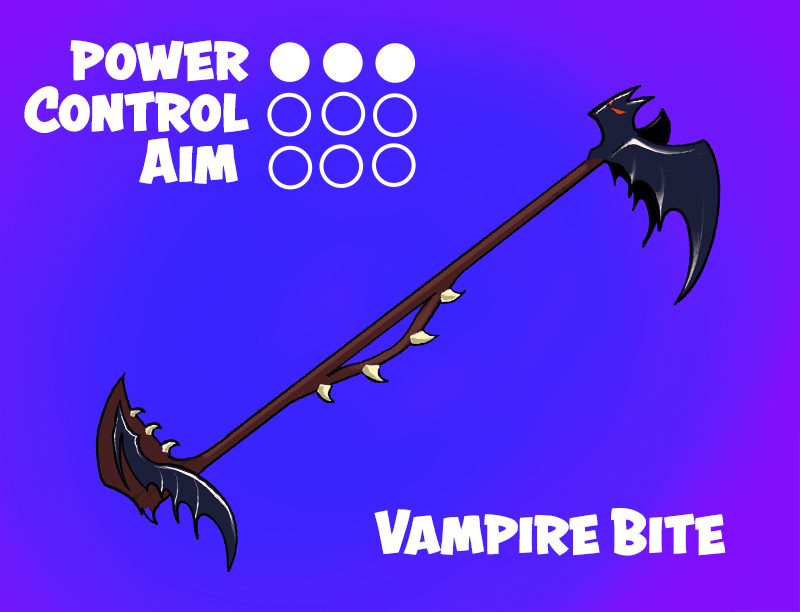
<style>
.page{position:relative;width:800px;height:612px}
.page>*{position:absolute;margin:0}
.t1{font:67.2px/51.5px "AstounderSquaredBB-Bold";letter-spacing:-0.02em;color:#ffffff;scale:1.15 1}
.t2{font:67.2px "AstounderSquaredBB-Bold";letter-spacing:-0.02em;color:#ffffff;scale:1.15 1}
</style>
<div class="page">
<p class="t1" style="left:24px;top:40px;width:225px;height:144px;text-align:right">power<br>Control<br>Aim</p>
<p class="t2" style="left:374px;top:508px;width:352px;height:48px">Vampire Bite</p>
</div>
